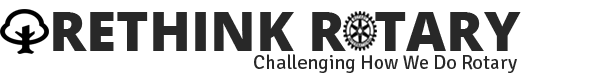
<style>
.page{position:relative;width:600px;height:80px;background:#ffffff}
.page>*{position:absolute;margin:0}
.t1{font:55px "OpenSans-Extrabold";color:#282828}
.t2{font:20px "Signika-Regular";color:#282828}
</style>
<div class="page">
<p class="t1" style="left:53px;top:12px;width:468px;height:39px">RETHINK R  TARY</p>
<p class="t2" style="left:254px;top:54px;width:263px;height:19px">Challenging How We Do Rotary</p>
</div>
